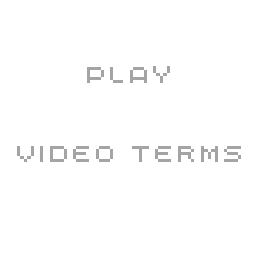
<style>
.page{position:relative;width:256px;height:256px;background:#ffffff}
.page>*{position:absolute;margin:0}
.t1{font:33px "LomoWebPixelLTStd-5";color:#a4a4a4}
.t2{font:33px "LomoWebPixelLTStd-5";color:#ffffff}
</style>
<div class="page">
<p class="t1" style="left:17px;top:66px;width:224px;height:96px;text-align:center">Play<br><span class="t2">Options<br></span>Video Terms</p>
</div>
